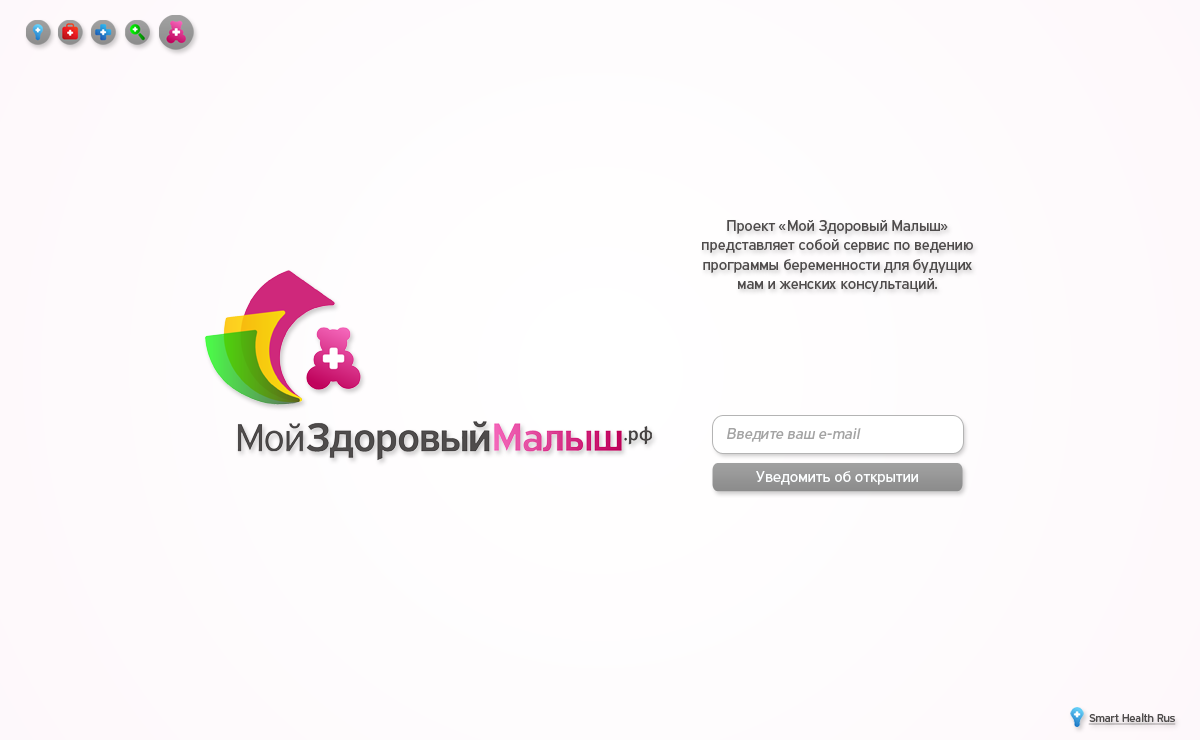
<style>
.page{position:relative;width:1200px;height:740px}
.page>*{position:absolute;margin:0}
.t1{font:16px "PFHighwaySansPro-Regular";color:#4f4c4c}
.t2{font:16px "PFHighwaySansPro-Regular";color:#a4a4a4;font-style:italic}
.t3{font:16px "PFHighwaySansPro-Regular";color:#fcfeff}
.t4{font:12px "PFHighwaySansPro-Regular";color:#4f4c4c;text-decoration:underline}
</style>
<div class="page">
<p class="t1" style="left:702px;top:220px;width:271px;height:72px;text-align:center">Проект «Мой Здоровый Малыш» представляет собой сервис по ведению программы беременности для будущих мам и женских консультаций.</p>
<p class="t2" style="left:727px;top:428px;width:134px;height:14px">Введите ваш e-mail</p>
<p class="t3" style="left:756px;top:471px;width:162px;height:14px">Уведомить об открытии</p>
<p class="t4" style="left:1088px;top:713px;width:88px;height:12px">Smart Health Rus</p>
</div>
